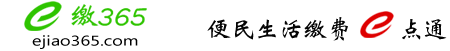
<style>
.page{position:relative;width:450px;height:51px;background:#ffffff}
.page>*{position:absolute;margin:0}
.t1{font:24px "-G-w-e-i-0-0-h";color:#040404}
.t2{font:14.1px "MicrosoftNewTaiLue";color:#000000;scale:1.29 1}
</style>
<div class="page">
<p class="t1" style="left:207px;top:17px;width:240px;height:24px">便民生活缴费    点通</p>
<p class="t2" style="left:32px;top:35px;width:106px;height:14px">ejiao365.com</p>
</div>
